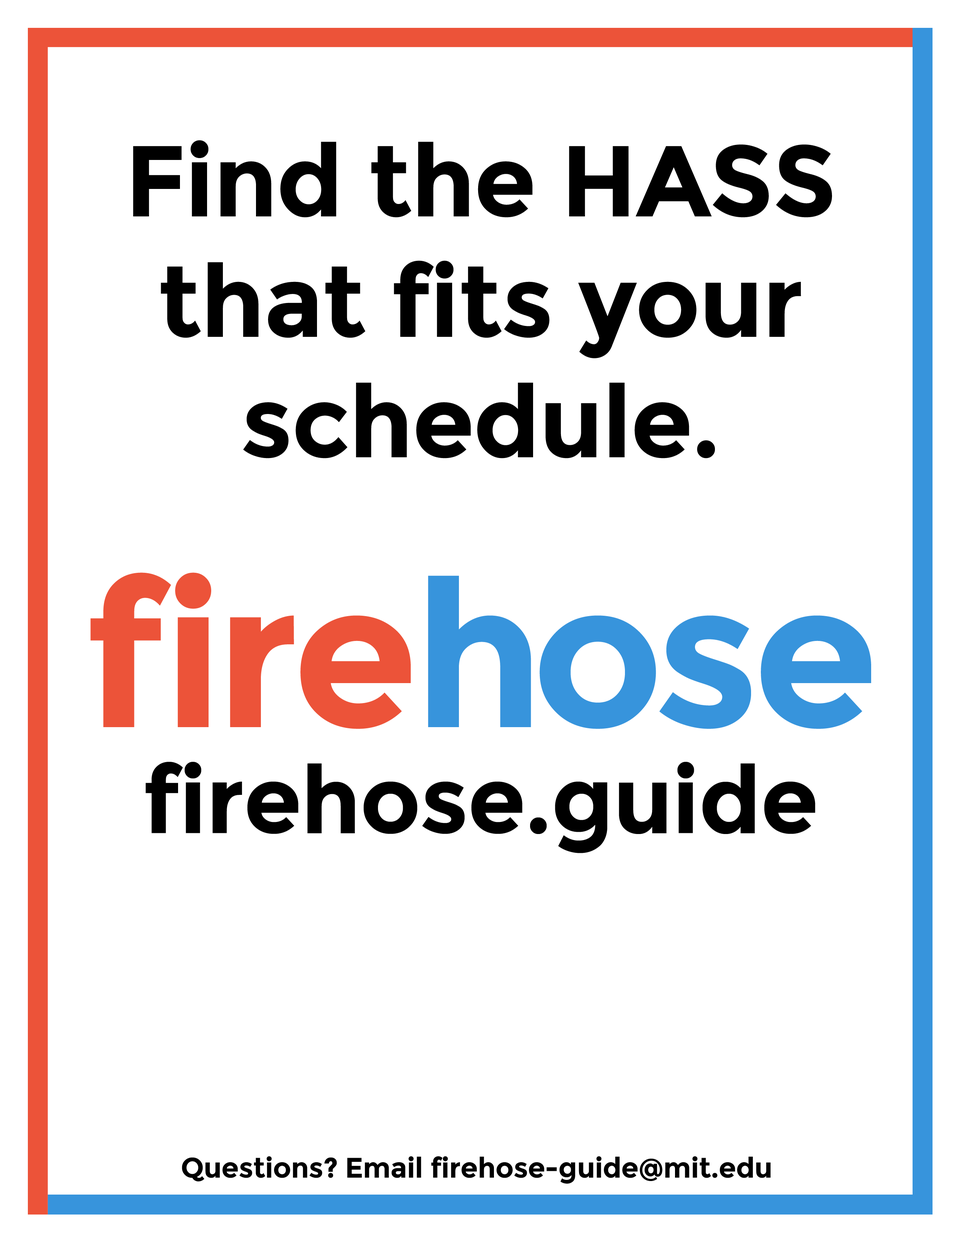
<style>
.page{position:relative;width:960px;height:1242px;background:#ffffff}
.page>*{position:absolute;margin:0}
.t1{font:100.4px "Montserrat-Bold";letter-spacing:-0.01em;color:#000000}
.t2{font:203.9px "Montserrat-Bold";letter-spacing:-0.01em;color:#ec5339}
.t3{font:203.9px "Montserrat-Bold";letter-spacing:-0.01em;color:#3794dc}
.t4{font:94.1px "Montserrat-Bold";letter-spacing:-0.01em;color:#000000}
.t5{font:28.2px "Montserrat-Bold";letter-spacing:-0.01em;color:#000000}
</style>
<div class="page">
<p class="t1" style="left:133px;top:140px;width:699px;height:318px;text-align:center">Find the HASS<br>that fits your<br>schedule.</p>
<p class="t2" style="left:90px;top:573px;width:781px;height:156px">fire<span class="t3">hose</span></p>
<p class="t4" style="left:146px;top:762px;width:669px;height:91px">firehose.guide</p>
<p class="t5" style="left:182px;top:1156px;width:589px;height:28px">Questions? Email firehose-guide@mit.edu</p>
</div>
